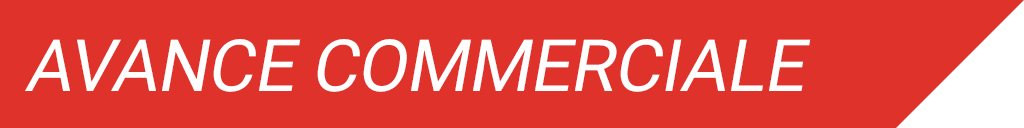
<style>
.page{position:relative;width:1024px;height:128px;background:#df322a}
.page>*{position:absolute;margin:0}
.t1{font:72px "Roboto-Regular";letter-spacing:-0.01em;color:#ffffff;font-style:italic}
</style>
<div class="page">
<p class="t1" style="left:25px;top:39px;width:786px;height:53px">AVANCE COMMERCIALE</p>
</div>
